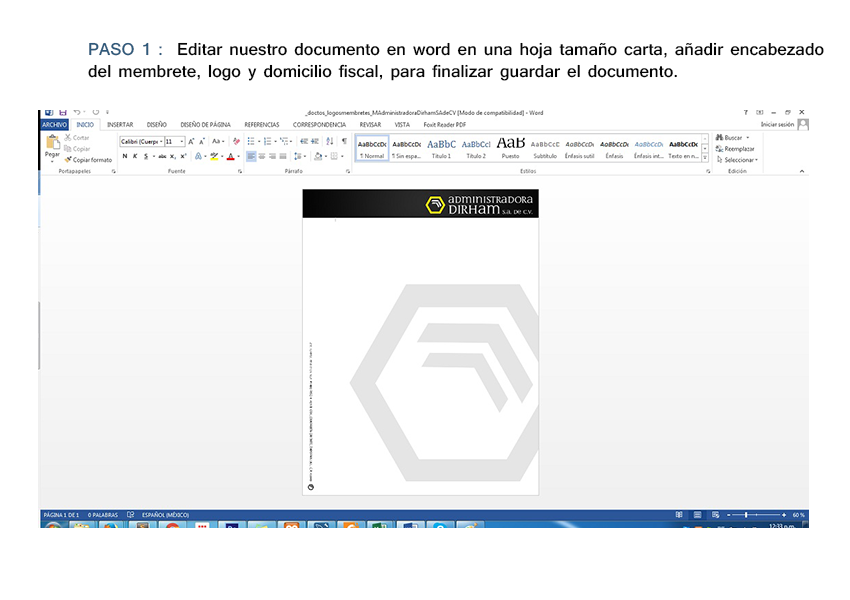
<style>
.page{position:relative;width:850px;height:600px;background:#ffffff}
.page>*{position:absolute;margin:0}
.t1{font:18px "Shruti-Bold";color:#050505}
.t2{font:18px "Shruti-Bold";color:#305a7b}
</style>
<div class="page">
<p class="t1" style="left:88px;top:42px;width:736px;height:39px"><span class="t2">PASO 1 :  </span>Editar nuestro documento en word en una hoja tamaño carta, añadir encabezado<br>del membrete, logo y domicilio fiscal, para finalizar guardar el documento.</p>
</div>
